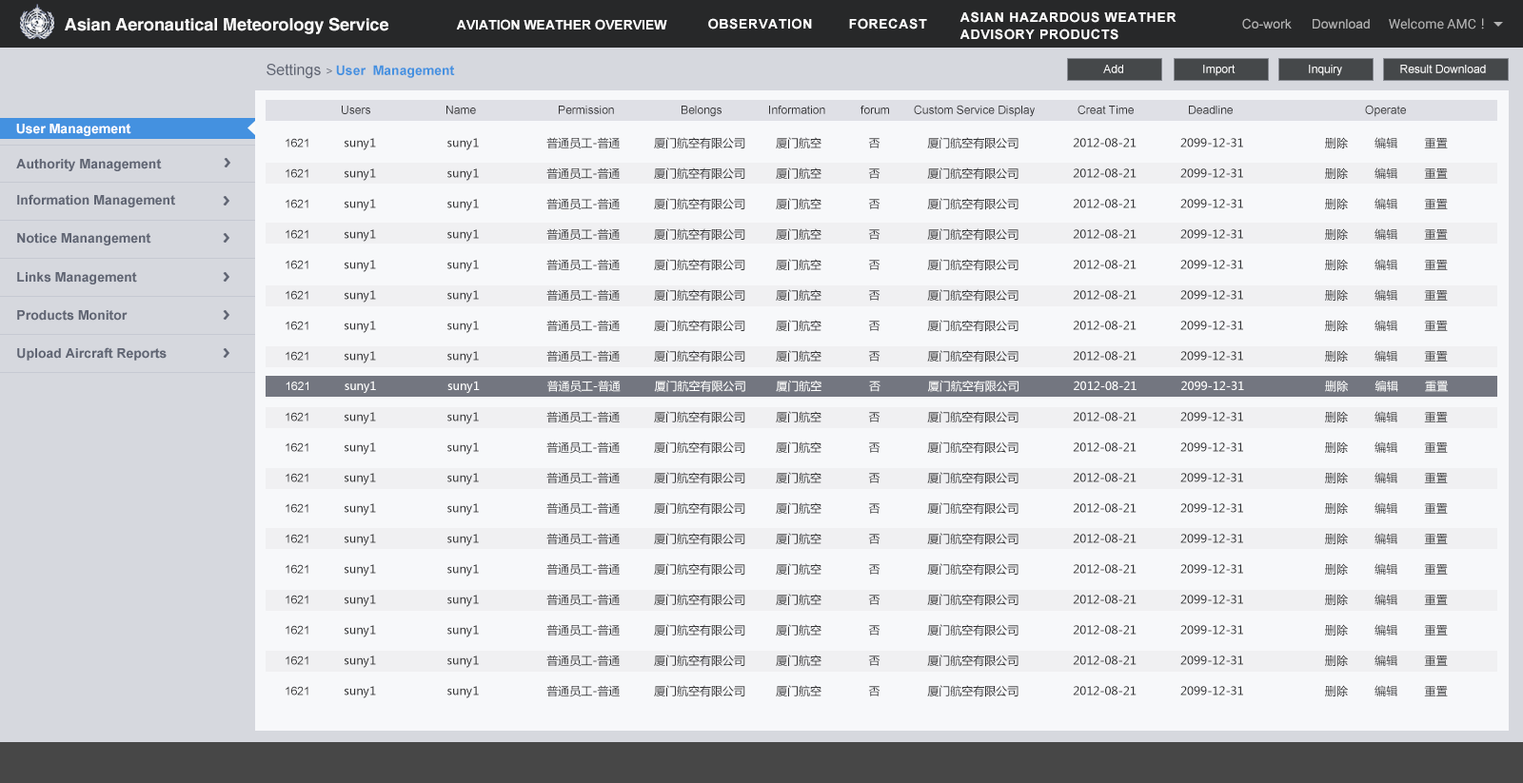
<style>
.page{position:relative;width:1523px;height:783px;background:#f7f8fa}
.page>*{position:absolute;margin:0}
.t1{font:17.1px "Helvetica-Bold";letter-spacing:-0.005em;color:#fafafa}
.t2{font:13.3px/17.1px "Arial-BoldMT";letter-spacing:0.05em;color:#ffffff}
.t3{font:13.3px "Arial-BoldMT";color:#ffffff}
.t4{font:13.3px "Arial-BoldMT";letter-spacing:0.05em;color:#ffffff}
.t5{font:13.3px "ArialMT";color:#b3b3b3}
.t6{font:13.3px "Roboto-Regular";color:#b3b3b3}
.t7{font:13.3px "MicrosoftYaHei";color:#b3b3b3}
.t8{font:13.3px "Arial-BoldMT";color:#4491e0}
.t9{font:15.2px "ArialMT";color:#606573}
.t10{font:11.4px "ArialMT";color:#606573}
.t11{font:11.4px "ArialMT";color:#ffffff}
.t12{font:11.4px "ArialMT";color:#313133}
.t13{font:11.4px/30.5px "MicrosoftYaHei";color:#313133}
.t14{font:11.4px/30.5px "ArialMT";color:#313133}
.t15{font:13.3px "Arial-BoldMT";color:#606573}
.t16{font:11.4px "MicrosoftYaHei";color:#ffffff}
</style>
<div class="page">
<p class="t1" style="left:65px;top:17px;width:323px;height:17px">Asian Aeronautical Meteorology Service</p>
<p class="t2" style="left:959px;top:11px;width:217px;height:29px">ASIAN HAZARDOUS WEATHER<br>ADVISORY PRODUCTS</p>
<p class="t3" style="left:456px;top:19px;width:211px;height:11px">AVIATION WEATHER OVERVIEW</p>
<p class="t4" style="left:708px;top:18px;width:104px;height:11px">OBSERVATION</p>
<p class="t4" style="left:849px;top:18px;width:78px;height:11px">FORECAST</p>
<p class="t5" style="left:1242px;top:18px;width:49px;height:11px">Co-work</p>
<p class="t5" style="left:1312px;top:19px;width:57px;height:10px">Download</p>
<p class="t6" style="left:1388px;top:18px;width:96px;height:11px">Welcome AMC<span class="t7">！</span></p>
<p class="t8" style="left:266px;top:64px;width:189px;height:15px"><span class="t9">Settings </span><span class="t10">&gt; </span>User  Management</p>
<p class="t11" style="left:1103px;top:65px;width:20px;height:8px">Add</p>
<p class="t11" style="left:1203px;top:65px;width:32px;height:11px">Import</p>
<p class="t11" style="left:1308px;top:65px;width:34px;height:11px">Inquiry</p>
<p class="t11" style="left:1400px;top:65px;width:85px;height:8px">Result Download</p>
<p class="t12" style="left:342px;top:106px;width:28px;height:8px">Users</p>
<p class="t12" style="left:446px;top:106px;width:30px;height:8px">Name</p>
<p class="t12" style="left:559px;top:106px;width:55px;height:8px">Permission</p>
<p class="t12" style="left:681px;top:106px;width:40px;height:11px">Belongs</p>
<p class="t12" style="left:769px;top:106px;width:56px;height:8px">Information</p>
<p class="t12" style="left:860px;top:106px;width:29px;height:8px">forum</p>
<p class="t12" style="left:914px;top:105px;width:120px;height:12px">Custom Service Display</p>
<p class="t12" style="left:1077px;top:105px;width:56px;height:9px">Creat Time</p>
<p class="t12" style="left:1189px;top:106px;width:43px;height:8px">Deadline</p>
<p class="t12" style="left:1365px;top:105px;width:41px;height:12px">Operate</p>
<p class="t3" style="left:16px;top:124px;width:115px;height:12px">User Management</p>
<p class="t13" style="left:285px;top:137px;width:1162px;height:561px"><span class="t14">1621</span>          suny1                     suny1                    普通员工-普通          厦门航空有限公司         厦门航空              否              厦门航空有限公司                2012-08-21             2099-12-31                        删除        编辑        重置<br><span class="t14">1621</span>          suny1                     suny1                    普通员工-普通          厦门航空有限公司         厦门航空              否              厦门航空有限公司                2012-08-21             2099-12-31                        删除        编辑        重置<br><span class="t14">1621</span>          suny1                     suny1                    普通员工-普通          厦门航空有限公司         厦门航空              否              厦门航空有限公司                2012-08-21             2099-12-31                        删除        编辑        重置<br><span class="t14">1621</span>          suny1                     suny1                    普通员工-普通          厦门航空有限公司         厦门航空              否              厦门航空有限公司                2012-08-21             2099-12-31                        删除        编辑        重置<br><span class="t14">1621</span>          suny1                     suny1                    普通员工-普通          厦门航空有限公司         厦门航空              否              厦门航空有限公司                2012-08-21             2099-12-31                        删除        编辑        重置<br><span class="t14">1621</span>          suny1                     suny1                    普通员工-普通          厦门航空有限公司         厦门航空              否              厦门航空有限公司                2012-08-21             2099-12-31                        删除        编辑        重置<br><span class="t14">1621</span>          suny1                     suny1                    普通员工-普通          厦门航空有限公司         厦门航空              否              厦门航空有限公司                2012-08-21             2099-12-31                        删除        编辑        重置<br><span class="t14">1621</span>          suny1                     suny1                    普通员工-普通          厦门航空有限公司         厦门航空              否              厦门航空有限公司                2012-08-21             2099-12-31                        删除        编辑        重置<br><br><span class="t14">1621</span>          suny1                     suny1                    普通员工-普通          厦门航空有限公司         厦门航空              否              厦门航空有限公司                2012-08-21             2099-12-31                        删除        编辑        重置<br><span class="t14">1621</span>          suny1                     suny1                    普通员工-普通          厦门航空有限公司         厦门航空              否              厦门航空有限公司                2012-08-21             2099-12-31                        删除        编辑        重置<br><span class="t14">1621</span>          suny1                     suny1                    普通员工-普通          厦门航空有限公司         厦门航空              否              厦门航空有限公司                2012-08-21             2099-12-31                        删除        编辑        重置<br><span class="t14">1621</span>          suny1                     suny1                    普通员工-普通          厦门航空有限公司         厦门航空              否              厦门航空有限公司                2012-08-21             2099-12-31                        删除        编辑        重置<br><span class="t14">1621</span>          suny1                     suny1                    普通员工-普通          厦门航空有限公司         厦门航空              否              厦门航空有限公司                2012-08-21             2099-12-31                        删除        编辑        重置<br><span class="t14">1621</span>          suny1                     suny1                    普通员工-普通          厦门航空有限公司         厦门航空              否              厦门航空有限公司                2012-08-21             2099-12-31                        删除        编辑        重置<br><span class="t14">1621</span>          suny1                     suny1                    普通员工-普通          厦门航空有限公司         厦门航空              否              厦门航空有限公司                2012-08-21             2099-12-31                        删除        编辑        重置<br><span class="t14">1621</span>          suny1                     suny1                    普通员工-普通          厦门航空有限公司         厦门航空              否              厦门航空有限公司                2012-08-21             2099-12-31                        删除        编辑        重置<br><span class="t14">1621</span>          suny1                     suny1                    普通员工-普通          厦门航空有限公司         厦门航空              否              厦门航空有限公司                2012-08-21             2099-12-31                        删除        编辑        重置<br><span class="t14">1621</span>          suny1                     suny1                    普通员工-普通          厦门航空有限公司         厦门航空              否              厦门航空有限公司                2012-08-21             2099-12-31                        删除        编辑        重置<br>            suny1                         suny1                    普通员工-普通          厦门航空有限公司         厦门航空              否              厦门航空有限公司                2012-08-21             2099-12-31                        删除        编辑        重置</p>
<p class="t15" style="left:16px;top:159px;width:146px;height:12px">Authority Management</p>
<p class="t15" style="left:17px;top:194px;width:158px;height:13px">Information Management</p>
<p class="t15" style="left:17px;top:233px;width:134px;height:13px">Notice Manangement</p>
<p class="t15" style="left:17px;top:272px;width:120px;height:13px">Links Management</p>
<p class="t15" style="left:17px;top:310px;width:111px;height:11px">Products Monitor</p>
<p class="t15" style="left:17px;top:347px;width:150px;height:14px">Upload Aircraft Reports</p>
<p class="t16" style="left:285px;top:380px;width:1162px;height:13px"><span class="t11">1621</span>          suny1                     suny1                    普通员工-普通          厦门航空有限公司         厦门航空              否              厦门航空有限公司                2012-08-21             2099-12-31                        删除        编辑        重置</p>
</div>
